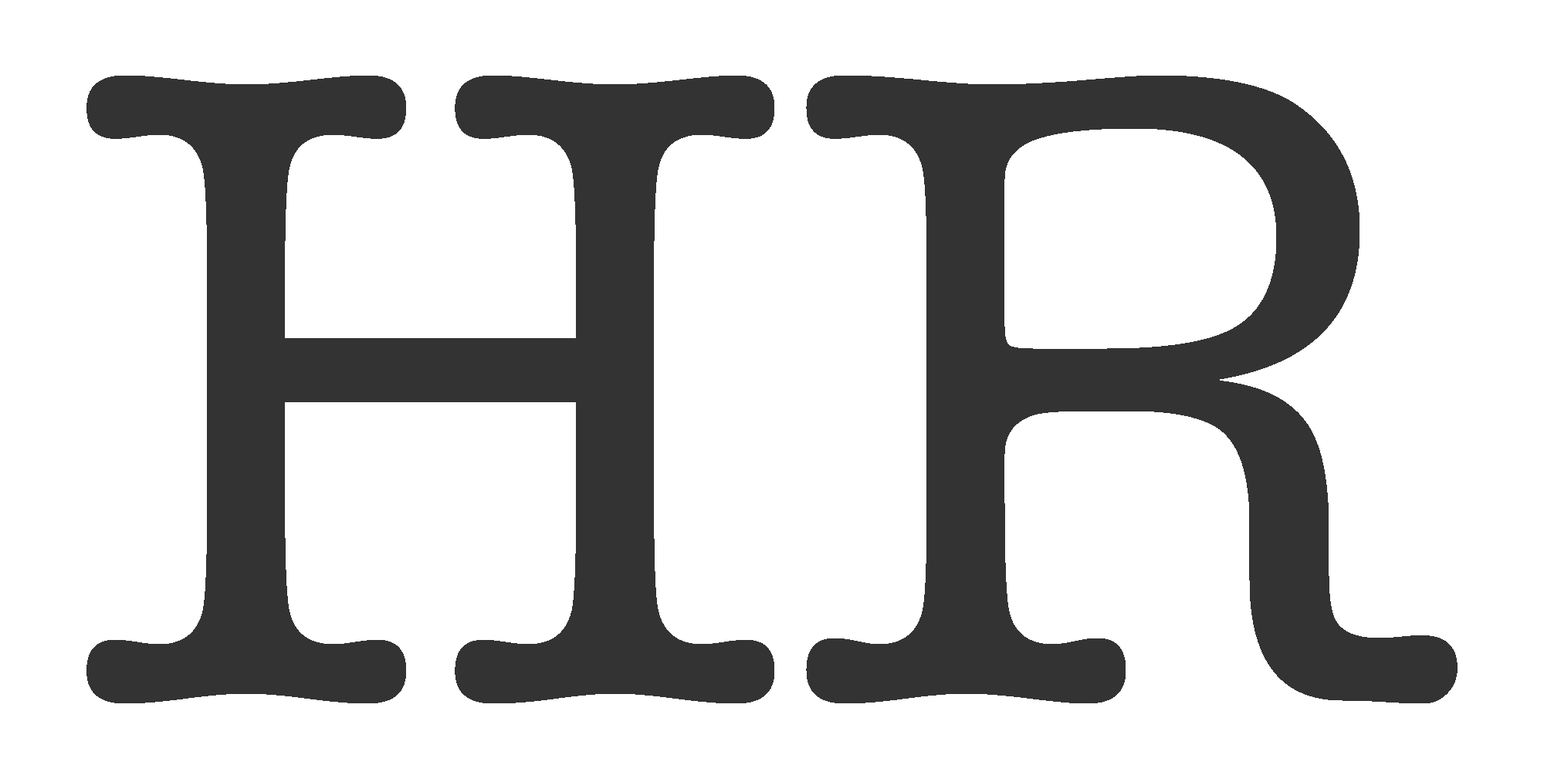
<style>
.page{position:relative;width:1544px;height:772px;background:#ffffff}
.page>*{position:absolute;margin:0}
.t1{font:900.8px "AmericanTypewriterMedium";color:#333333}
</style>
<div class="page">
<p class="t1" style="left:86px;top:76px;width:1372px;height:627px">HR</p>
</div>
